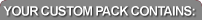
<style>
.page{position:relative;width:202px;height:20px;background:#858585}
.page>*{position:absolute;margin:0}
.t1{font:12.8px "Arial-BoldMT";letter-spacing:-0.05em;color:#ffffff}
</style>
<div class="page">
<p class="t1" style="left:3px;top:6px;width:192px;height:10px">YOUR CUSTOM PACK CONTAINS:</p>
</div>
